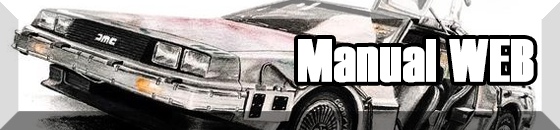
<style>
.page{position:relative;width:560px;height:130px}
.page>*{position:absolute;margin:0}
.t1{font:60px "Haettenschweiler";color:#ffffff;font-weight:bold}
</style>
<div class="page">
<p class="t1" style="left:298px;top:39px;width:236px;height:44px">Manual WEB</p>
</div>
